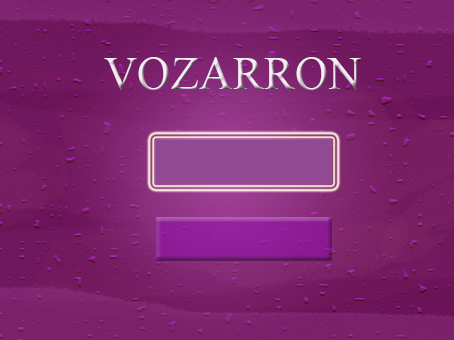
<style>
.page{position:relative;width:454px;height:340px}
.page>*{position:absolute;margin:0}
.t1{font:46.6px "TimesNewRomanPSMT"}
</style>
<div class="page">
<p class="t1" style="left:104px;top:57px;width:257px;height:33px">VOZARRON</p>
</div>
